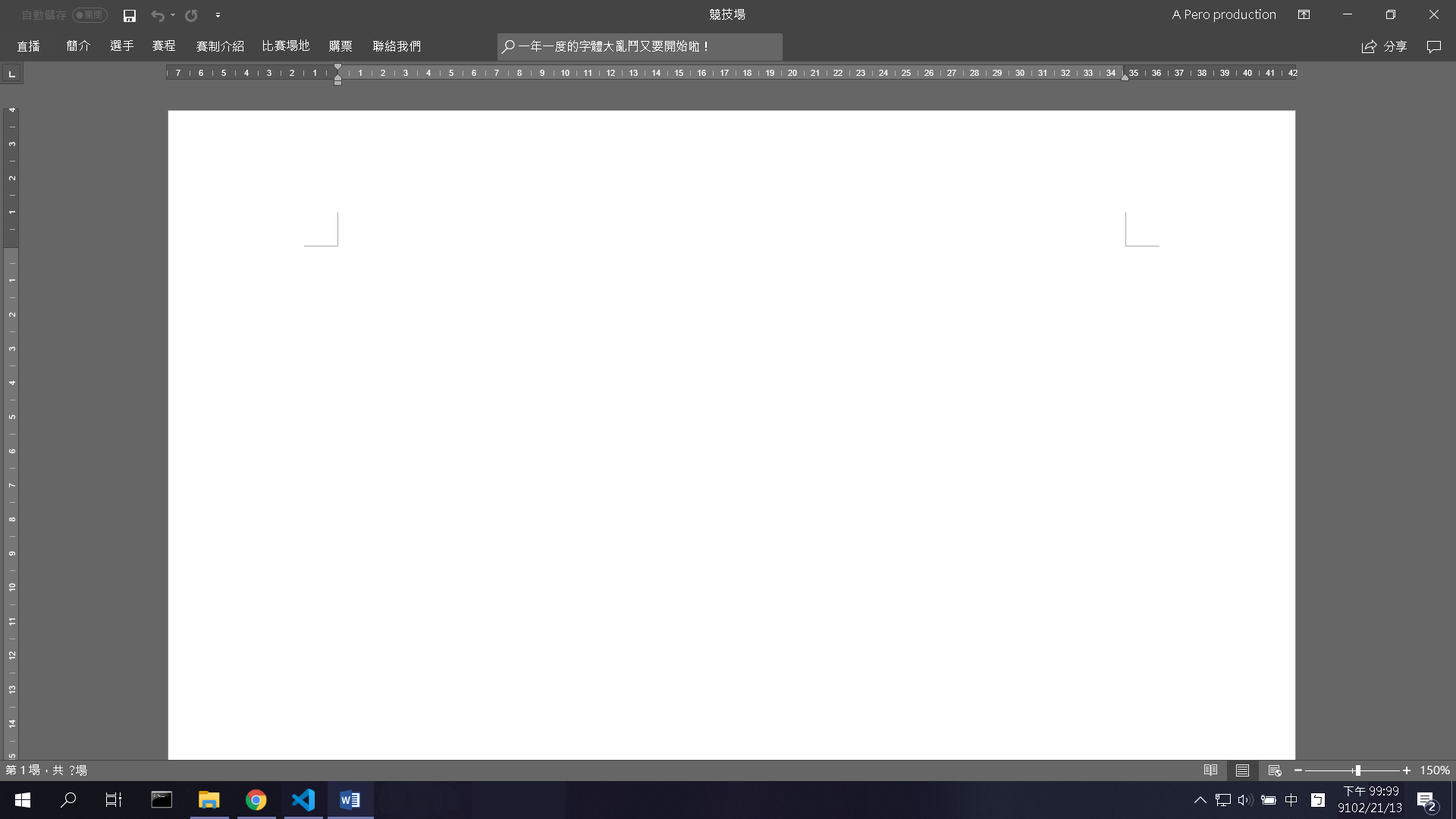
<style>
.page{position:relative;width:1456px;height:819px;background:#ffffff}
.page>*{position:absolute;margin:0}
.t1{font:12.1px "MicrosoftJhengHeiRegular";color:#fefefe}
</style>
<div class="page">
<p class="t1" style="left:710px;top:8px;width:35px;height:12px">競技場</p>
<p class="t1" style="left:1172px;top:9px;width:103px;height:13px">A Pero production</p>
<p class="t1" style="left:17px;top:40px;width:22px;height:12px">直播</p>
<p class="t1" style="left:67px;top:40px;width:23px;height:11px">簡介</p>
<p class="t1" style="left:111px;top:40px;width:22px;height:11px">選手</p>
<p class="t1" style="left:152px;top:40px;width:23px;height:11px">賽程</p>
<p class="t1" style="left:196px;top:41px;width:47px;height:11px">賽制介紹</p>
<p class="t1" style="left:263px;top:39px;width:46px;height:12px">比賽場地</p>
<p class="t1" style="left:329px;top:40px;width:23px;height:12px">購票</p>
<p class="t1" style="left:373px;top:40px;width:47px;height:12px">聯絡我們</p>
<p class="t1" style="left:519px;top:40px;width:188px;height:12px">一年一度的字體大亂鬥又要開始啦！</p>
<p class="t1" style="left:1384px;top:40px;width:23px;height:12px">分享</p>
<p class="t1" style="left:29px;top:764px;width:11px;height:11px">場</p>
<p class="t1" style="left:70px;top:765px;width:17px;height:11px">?場</p>
<p class="t1" style="left:1370px;top:786px;width:28px;height:9px">99:99</p>
<p class="t1" style="left:1338px;top:803px;width:63px;height:11px">9102/21/13</p>
</div>
